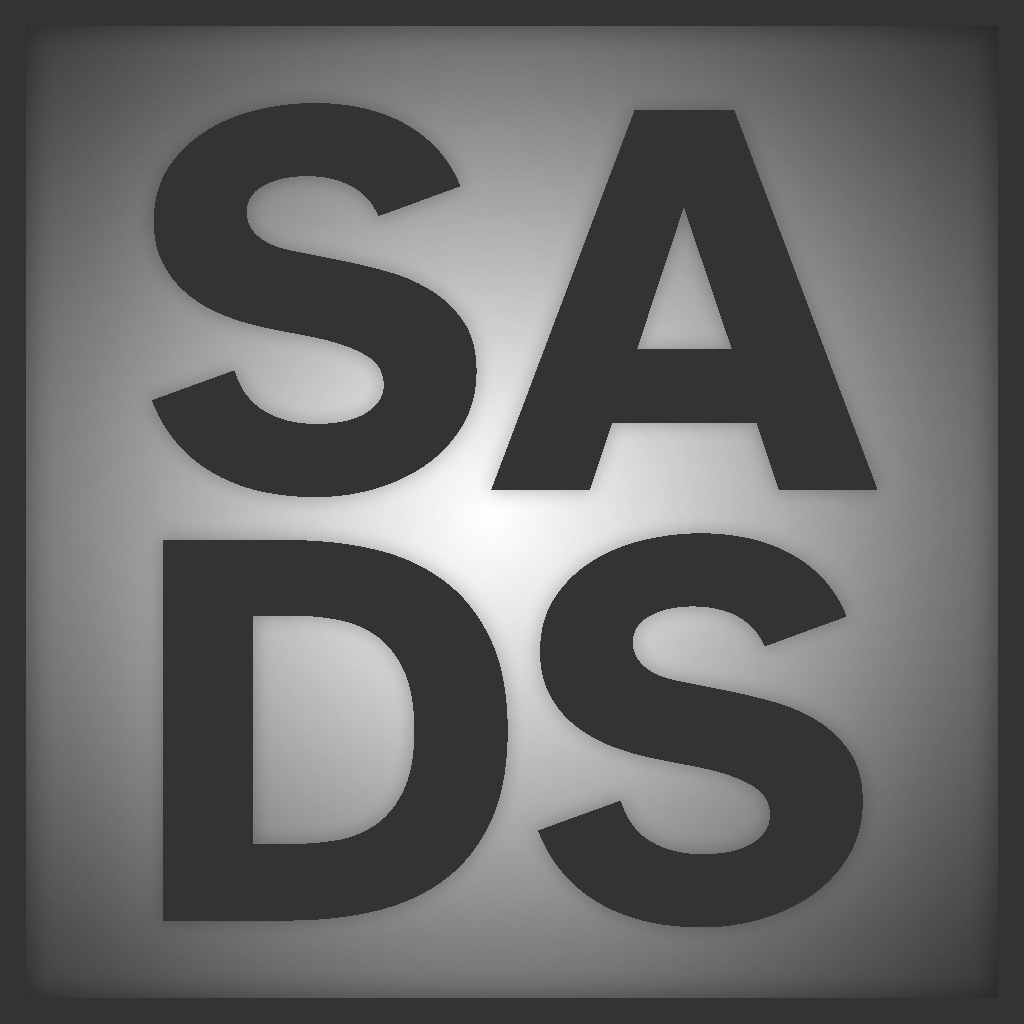
<style>
.page{position:relative;width:1024px;height:1024px;background:#333333}
.page>*{position:absolute;margin:0}
.t1{font:568px "AtkinsonHyperlegible-Bold";color:#333333}
</style>
<div class="page">
<p class="t1" style="left:152px;top:103px;width:725px;height:394px">SA</p>
<p class="t1" style="left:163px;top:533px;width:700px;height:394px">DS</p>
</div>
